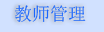
<style>
.page{position:relative;width:104px;height:32px;background:#d1e1ff}
.page>*{position:absolute;margin:0}
.t1{font:18px "SimSun";color:#1a66fd}
</style>
<div class="page">
<p class="t1" style="left:15px;top:5px;width:71px;height:17px">教师管理</p>
</div>
